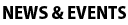
<style>
.page{position:relative;width:128px;height:25px;background:#ffffff}
.page>*{position:absolute;margin:0}
.t1{font:16.7px "KozGoPro-Heavy";color:#000000}
</style>
<div class="page">
<p class="t1" style="left:3px;top:6px;width:123px;height:13px">NEWS &amp; EVENTS</p>
</div>
